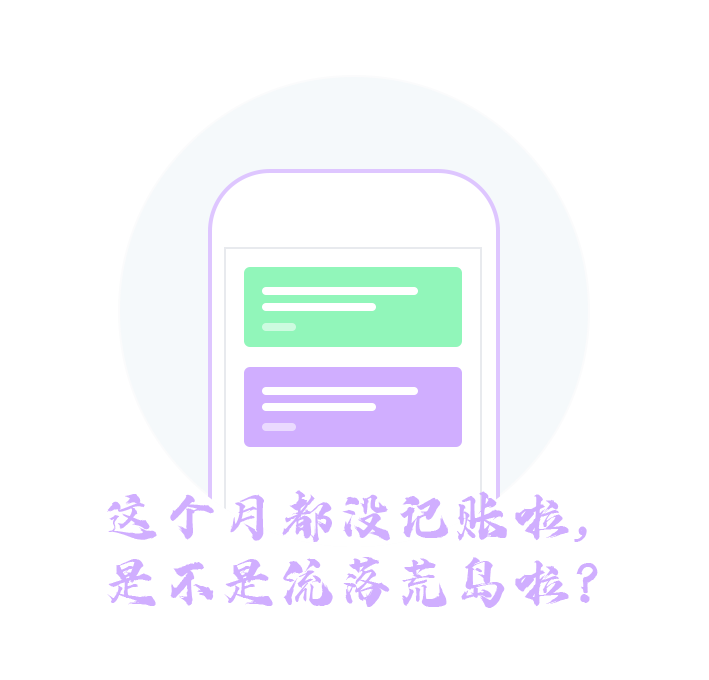
<style>
.page{position:relative;width:709px;height:680px;background:#ffffff}
.page>*{position:absolute;margin:0}
.t1{font:58.5px "iFontshangtiantengfeiti";color:#d0aeff}
</style>
<div class="page">
<p class="t1" style="left:107px;top:490px;width:491px;height:118px;text-align:center">这个月都没记账啦，<br>是不是流落荒岛啦？</p>
</div>
